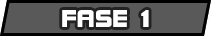
<style>
.page{position:relative;width:212px;height:36px;background:#595959}
.page>*{position:absolute;margin:0}
.t1{font:26.7px "DFSoGeiStd-W9";color:#ffffff;scale:0.9 1}
</style>
<div class="page">
<p class="t1" style="left:62px;top:10px;width:87px;height:17px">FASE 1</p>
</div>
